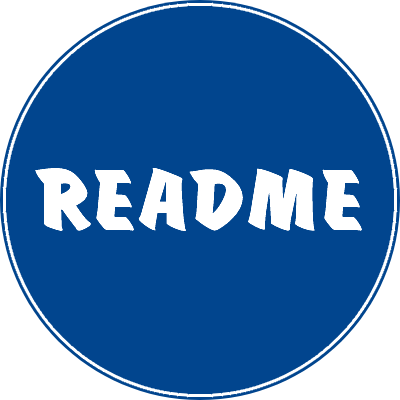
<style>
.page{position:relative;width:400px;height:400px;background:#01458e}
.page>*{position:absolute;margin:0}
.t1{font:90px "Scratch";letter-spacing:0.046em;color:#ffffff}
</style>
<div class="page">
<p class="t1" style="left:35px;top:168px;width:327px;height:63px">README</p>
</div>
